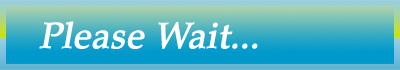
<style>
.page{position:relative;width:400px;height:70px}
.page>*{position:absolute;margin:0}
.t1{font:36px "ZapfCalligraphic801BT-Roman";color:#ffffff;font-weight:bold;font-style:italic}
</style>
<div class="page">
<p class="t1" style="left:39px;top:21px;width:219px;height:28px">Please Wait...</p>
</div>
